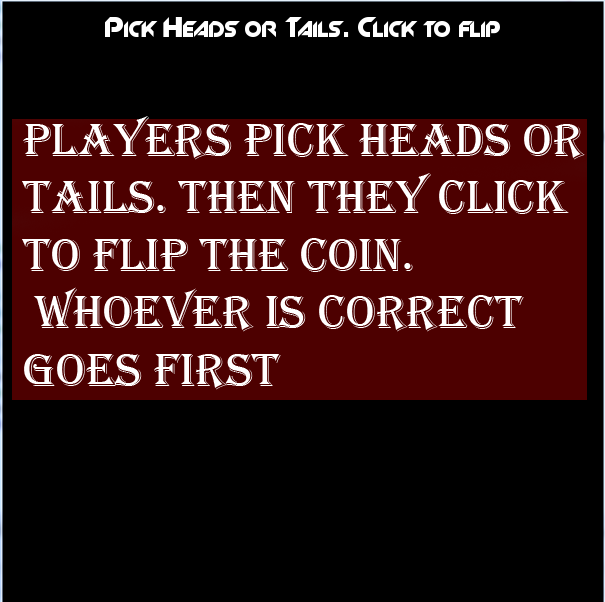
<style>
.page{position:relative;width:605px;height:602px;background:#000000}
.page>*{position:absolute;margin:0}
.t1{font:48px "Algerian";color:#ffffff}
</style>
<div class="page">
<p class="t1" style="left:22px;top:116px;width:563px;height:274px">PLayers pick heads or tails. then they click to flip the coin.<br> whoever is correct goes first</p>
</div>
